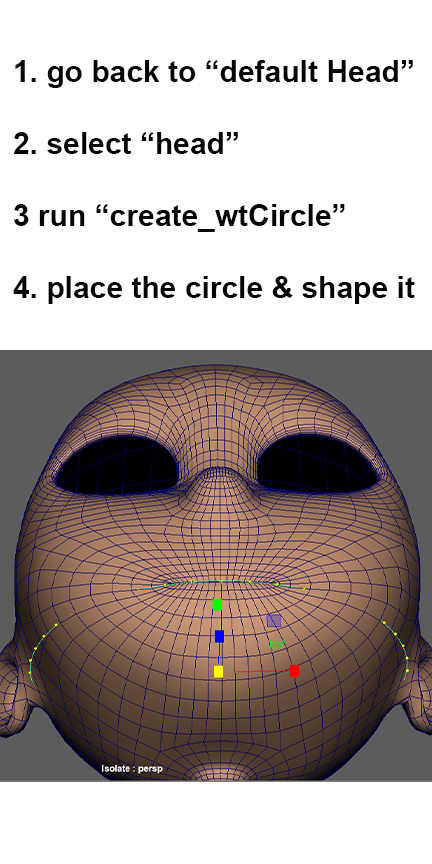
<style>
.page{position:relative;width:432px;height:864px;background:#ffffff}
.page>*{position:absolute;margin:0}
.t1{font:30px "Arial-BoldMT";color:#050505}
</style>
<div class="page">
<p class="t1" style="left:13px;top:60px;width:402px;height:244px">1. go back to “default Head”<br><br>2. select “head”<br><br>3 run “create_wtCircle”<br><br>4. place the circle &amp; shape it</p>
</div>
